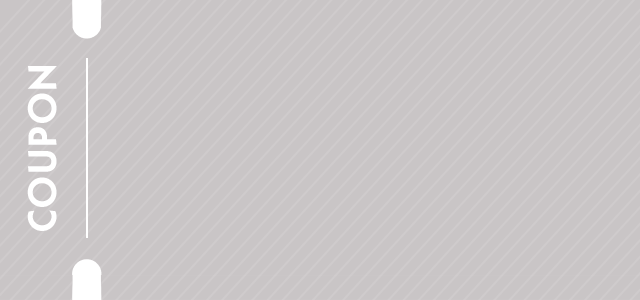
<style>
.page{position:relative;width:640px;height:300px;background:#c9c5c6}
.page>*{position:absolute;margin:0}
.t1{font:39.9px "KabelITCbyBT-Demi";letter-spacing:0.05em;color:#ffffff}
</style>
<div class="page">
<p class="t1" style="left:27px;top:66px;width:30px;height:165px;rotate:-90deg">COUPON</p>
</div>
